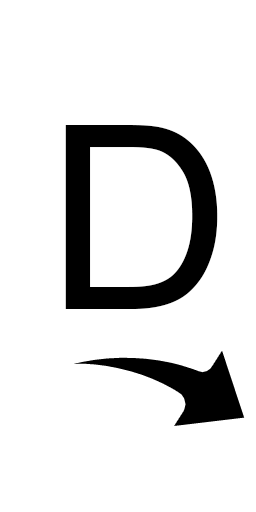
<style>
.page{position:relative;width:256px;height:512px;background:#ffffff}
.page>*{position:absolute;margin:0}
.t1{font:256px "ArialMT";color:#000000}
</style>
<div class="page">
<p class="t1" style="left:65px;top:125px;width:153px;height:184px">D</p>
</div>
